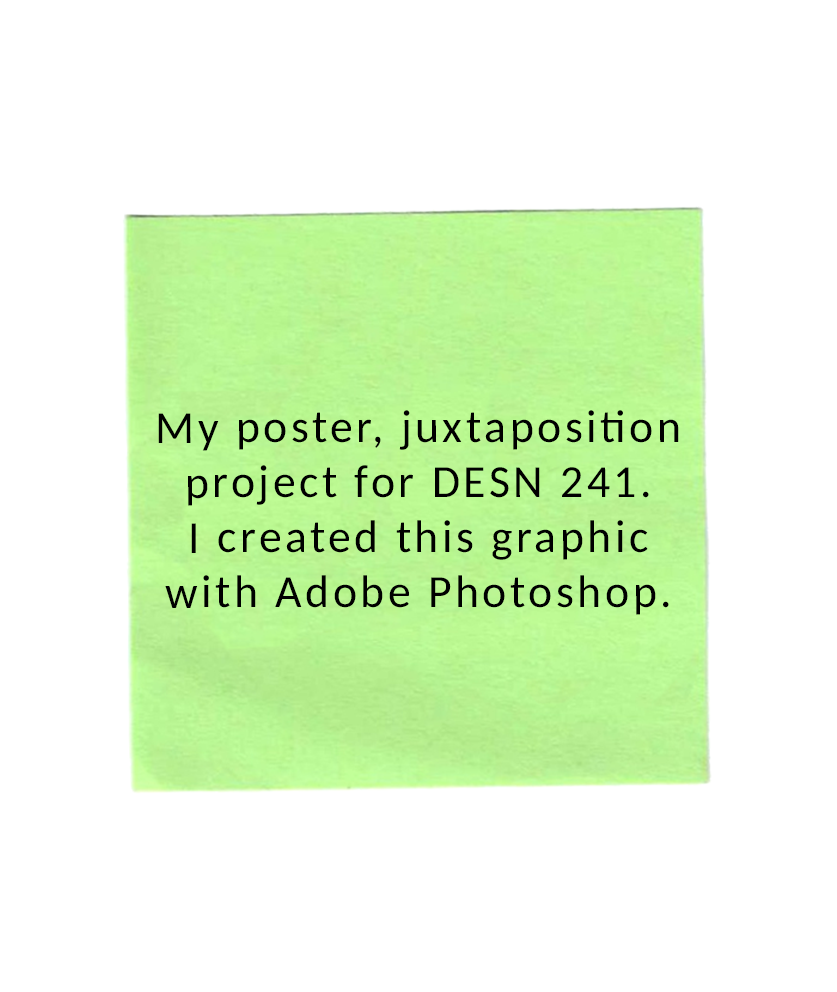
<style>
.page{position:relative;width:837px;height:992px;background:#ffffff}
.page>*{position:absolute;margin:0}
.t1{font:45.8px "Carlito-Regular";letter-spacing:0.075em;color:#000000}
</style>
<div class="page">
<p class="t1" style="left:158px;top:410px;width:521px;height:205px;text-align:center">My poster, juxtaposition project for DESN 241. <br>I created this graphic <br>with Adobe Photoshop.</p>
</div>
